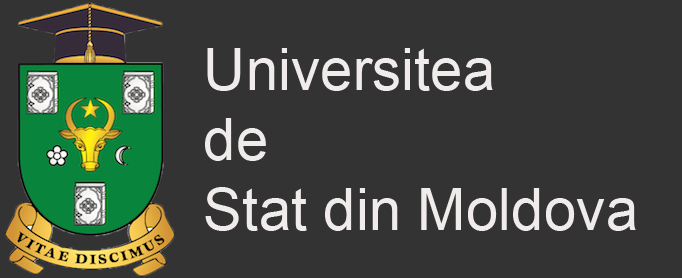
<style>
.page{position:relative;width:682px;height:278px;background:#333333}
.page>*{position:absolute;margin:0}
.t1{font:58.3px "ArialMT";color:#e4e3e3}
</style>
<div class="page">
<p class="t1" style="left:205px;top:48px;width:431px;height:183px">Universitea<br>de <br>Stat din Moldova</p>
</div>
